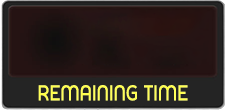
<style>
.page{position:relative;width:225px;height:110px}
.page>*{position:absolute;margin:0}
.t1{font:21.6px "ELURERegular";color:#ffff58;text-transform:uppercase;scale:0.9 1}
</style>
<div class="page">
<p class="t1" style="left:38px;top:85px;width:150px;height:16px">Remaining Time</p>
</div>
